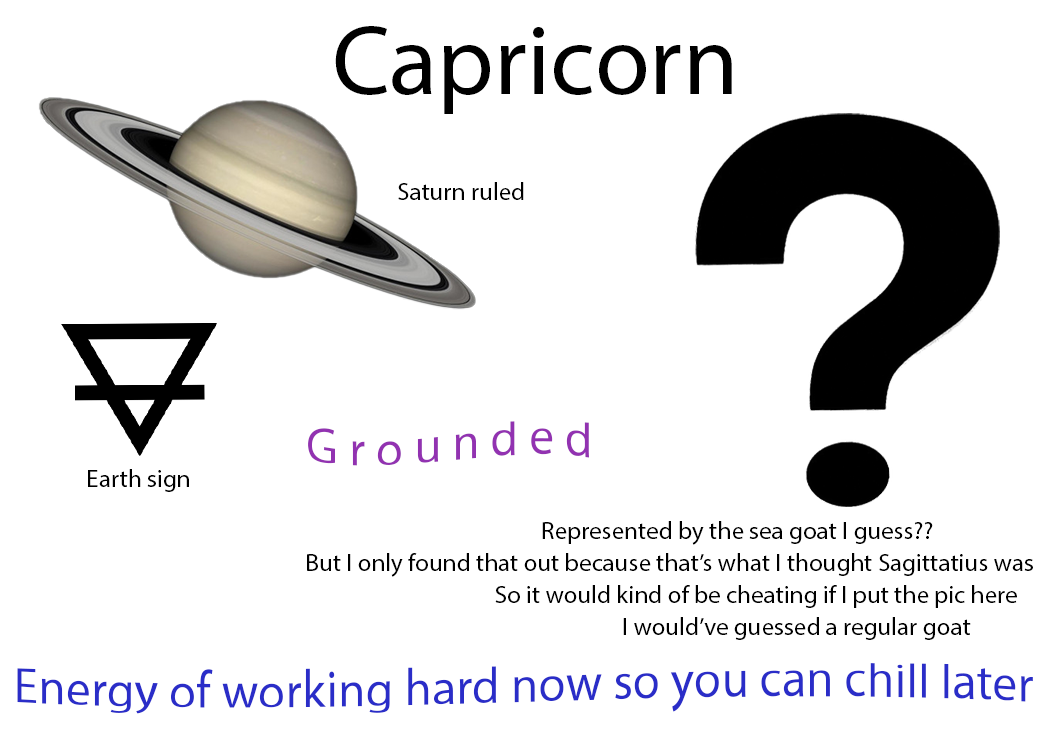
<style>
.page{position:relative;width:1050px;height:750px;background:#ffffff}
.page>*{position:absolute;margin:0}
.t1{font:100px "MyriadPro-Regular";color:#000000}
.t2{font:25px "MyriadPro-Regular";color:#000000}
.t3{font:50px "MyriadPro-Regular";color:#9232b1}
.t4{font:50px "MyriadPro-Regular";color:#2a2dc8}
</style>
<div class="page">
<p class="t1" style="left:335px;top:26px;width:397px;height:88px">Capricorn</p>
<p class="t2" style="left:398px;top:182px;width:126px;height:18px">Saturn ruled</p>
<p class="t3" style="left:308px;top:421px;width:281px;height:45px">G r o u n d e d</p>
<p class="t2" style="left:88px;top:469px;width:101px;height:23px">Earth sign</p>
<p class="t2" style="left:542px;top:521px;width:391px;height:24px">Represented by the sea goat I guess??</p>
<p class="t2" style="left:307px;top:553px;width:726px;height:24px">But I only found that out because that’s what I thought Sagittatius was</p>
<p class="t2" style="left:495px;top:585px;width:522px;height:23px">So it would kind of be cheating if I put the pic here</p>
<p class="t2" style="left:623px;top:617px;width:348px;height:23px">I would’ve guessed a regular goat</p>
<p class="t4" style="left:17px;top:663px;width:1016px;height:51px">Energy of working hard now so you can chill later</p>
</div>
